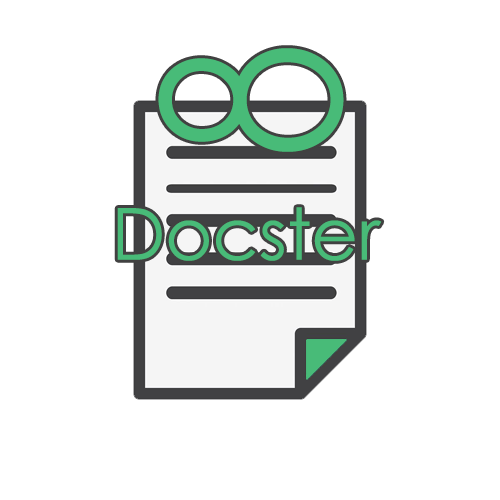
<style>
.page{position:relative;width:500px;height:500px;background:#ffffff}
.page>*{position:absolute;margin:0}
.t1{font:234.3px "Comfortaa-Light";color:#48bb78;scale:0.94 1}
.t2{font:72px "CenturyGothic";color:#48bb78}
</style>
<div class="page">
<p class="t1" style="left:158px;top:48px;width:186px;height:104px;rotate:-90deg">8</p>
<p class="t2" style="left:117px;top:207px;width:265px;height:54px">Docster</p>
</div>
